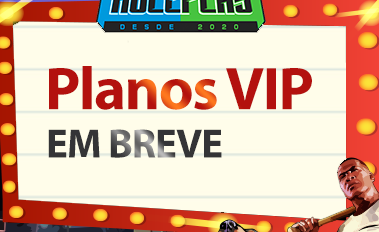
<style>
.page{position:relative;width:379px;height:232px;background:#fffdea}
.page>*{position:absolute;margin:0}
.t1{font:60.8px "MyriadPro-Bold";letter-spacing:-0.025em;color:#b3110e}
.t2{font:41px "MyriadPro-Bold";letter-spacing:-0.025em;color:#343436}
</style>
<div class="page">
<p class="t1" style="left:49px;top:66px;width:263px;height:44px">Planos VIP</p>
<p class="t2" style="left:48px;top:129px;width:174px;height:29px">EM BREVE</p>
</div>
